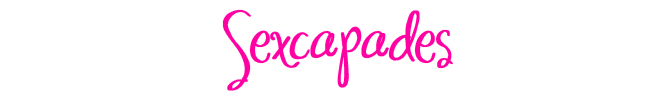
<style>
.page{position:relative;width:646px;height:100px;background:#ffffff}
.page>*{position:absolute;margin:0}
.t1{font:48px "MASexy";color:#ff00a2;font-weight:bold}
</style>
<div class="page">
<p class="t1" style="left:222px;top:9px;width:231px;height:82px">Sexcapades</p>
</div>
